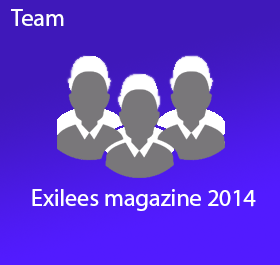
<style>
.page{position:relative;width:280px;height:265px;background:#3f18ba}
.page>*{position:absolute;margin:0}
.t1{font:24px "MyriadHebrew-Regular";color:#ffffff}
</style>
<div class="page">
<p class="t1" style="left:11px;top:9px;width:53px;height:17px">Team</p>
<p class="t1" style="left:32px;top:189px;width:224px;height:22px">Exilees magazine 2014</p>
</div>
